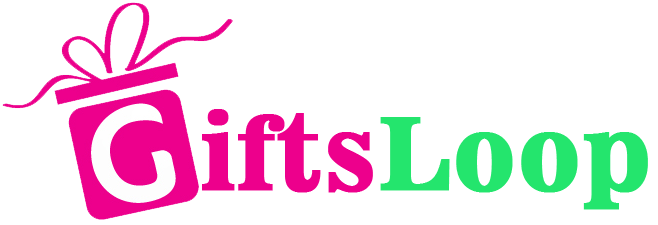
<style>
.page{position:relative;width:658px;height:225px;background:#ffffff}
.page>*{position:absolute;margin:0}
.t1{font:100px "News701BT-BoldA";color:#ed008c;font-weight:bold}
.t2{font:100px "News701BT-BoldA";color:#24e56d;font-weight:bold}
</style>
<div class="page">
<p class="t1" style="left:202px;top:109px;width:446px;height:101px">ifts <span class="t2">Loop</span></p>
</div>
